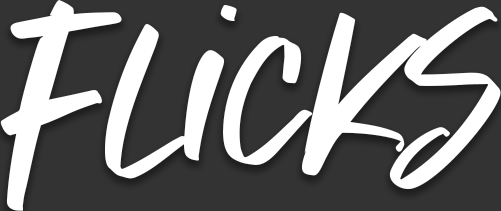
<style>
.page{position:relative;width:501px;height:211px;background:#333333}
.page>*{position:absolute;margin:0}
.t1{font:293.4px "Broady";color:#ffffff}
</style>
<div class="page">
<p class="t1" style="left:0px;top:0px;width:501px;height:211px">flicks</p>
</div>
